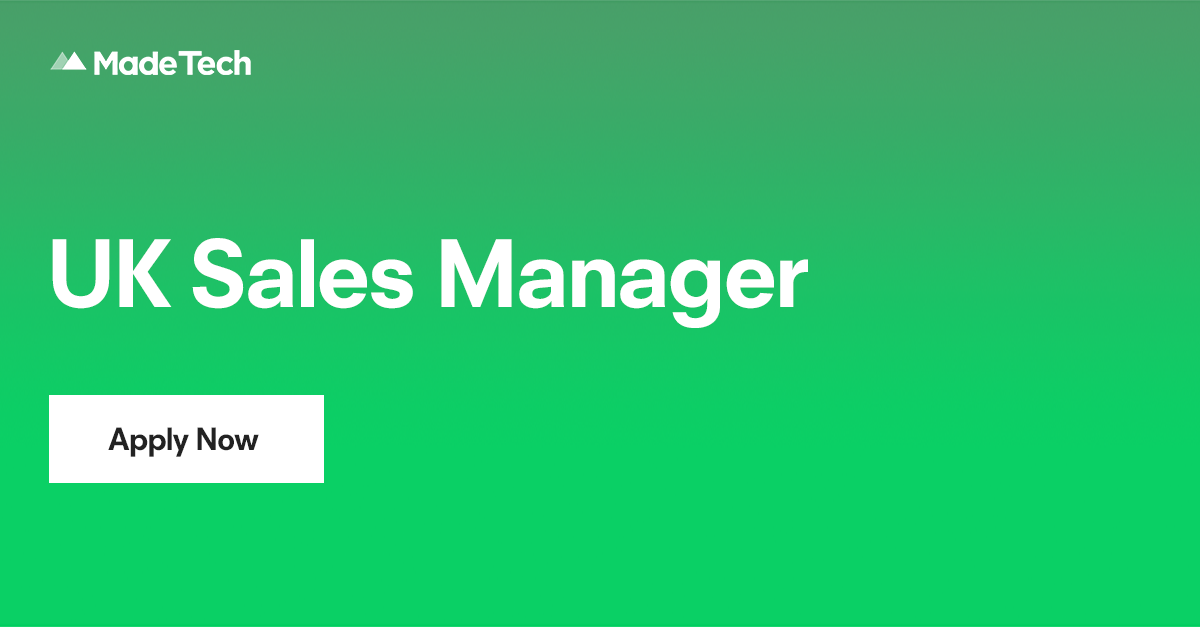
<style>
.page{position:relative;width:1200px;height:627px;background:#0ad065}
.page>*{position:absolute;margin:0}
.t1{font:90px "MadeFont-Bold";letter-spacing:-0.045em;color:#ffffff}
.t2{font:30px "MadeFont-Bold";letter-spacing:-0.045em;color:#222222}
</style>
<div class="page">
<p class="t1" style="left:52px;top:238px;width:756px;height:90px">UK Sales Manager</p>
<p class="t2" style="left:108px;top:427px;width:151px;height:30px">Apply Now</p>
</div>
